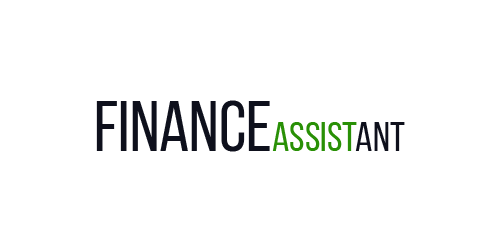
<style>
.page{position:relative;width:500px;height:250px;background:#ffffff}
.page>*{position:absolute;margin:0}
.t1{font:72px "BebasNeue-Regular";color:#0e101c}
.t2{font:59.1px "BebasNeue-Regular";color:#299006;font-variant:small-caps}
.t3{font:59.1px "BebasNeue-Regular";color:#0e101c;font-variant:small-caps}
</style>
<div class="page">
<p class="t1" style="left:96px;top:100px;width:174px;height:52px">Finance</p>
<p class="t2" style="left:272px;top:122px;width:133px;height:29px">assist<span class="t3">ant</span></p>
</div>
